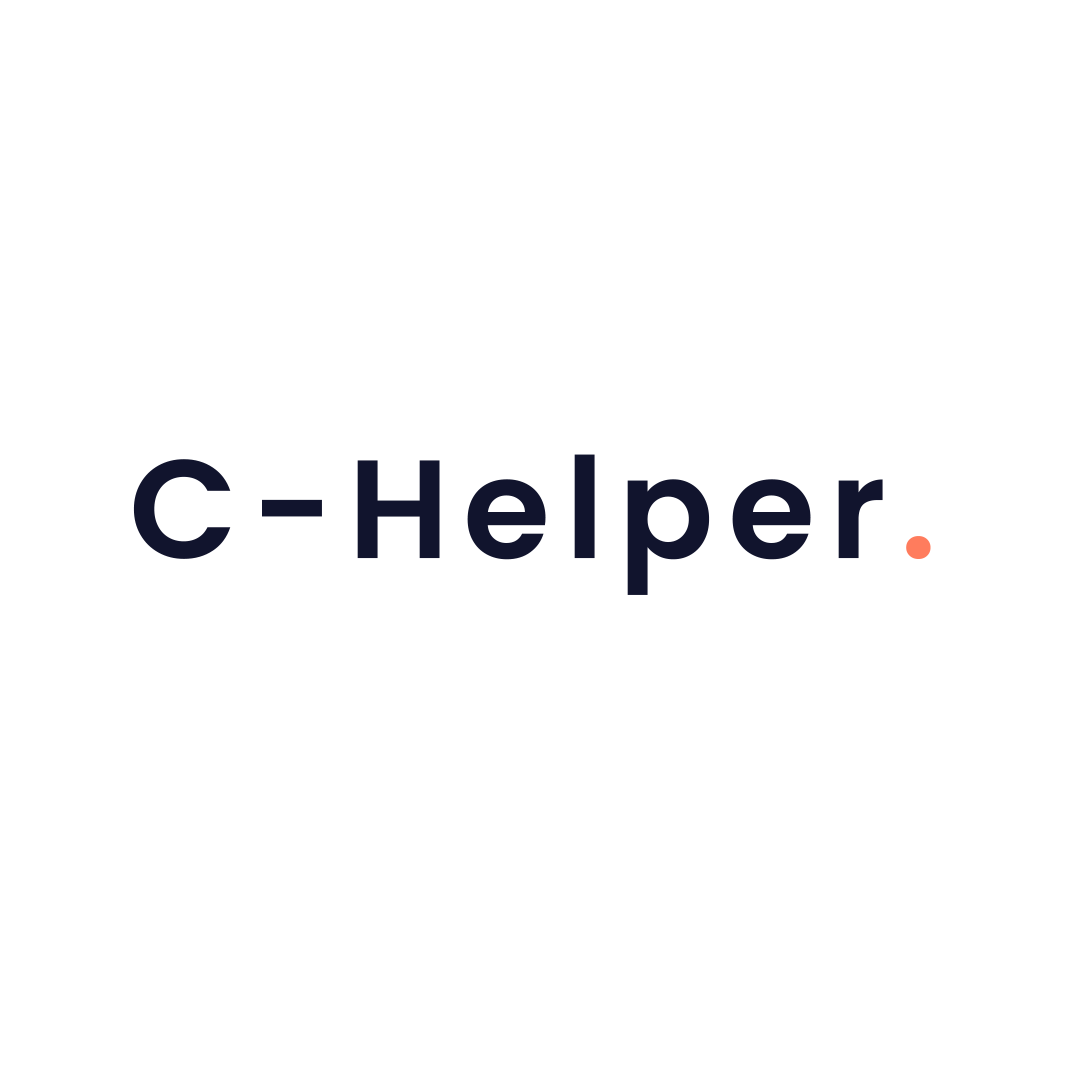
<style>
.page{position:relative;width:1080px;height:1080px;background:#ffffff}
.page>*{position:absolute;margin:0}
.t1{font:139.7px "Poppins-SemiBold";letter-spacing:0.1em;color:#11142d}
.t2{font:139.7px "Poppins-SemiBold";letter-spacing:0.1em;color:#ff7c5d}
</style>
<div class="page">
<p class="t1" style="left:133px;top:454px;width:798px;height:141px">C-Helper<span class="t2">.</span></p>
</div>
